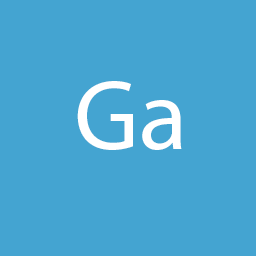
<style>
.page{position:relative;width:256px;height:256px;background:#44a4d1}
.page>*{position:absolute;margin:0}
.t1{font:100px "MyriadPro-Regular";color:#ffffff}
</style>
<div class="page">
<p class="t1" style="left:77px;top:81px;width:105px;height:69px">Ga</p>
</div>
